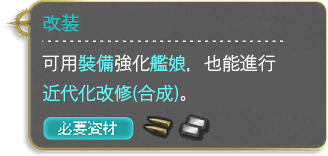
<style>
.page{position:relative;width:328px;height:156px;background:#5b5b5b}
.page>*{position:absolute;margin:0}
.t1{font:18px/30px "GothicMB101Pr6N-Light";color:#64fbff}
.t2{font:18px/30px "GothicMB101Pr6N-Light";color:#fbfaf9}
</style>
<div class="page">
<p class="t1" style="left:42px;top:54px;width:234px;height:48px"><span class="t2">可用</span>裝備<span class="t2">強化</span>艦娘<span class="t2">，也能進行<br></span>近代化改修(合成)<span class="t2">。</span></p>
</div>
